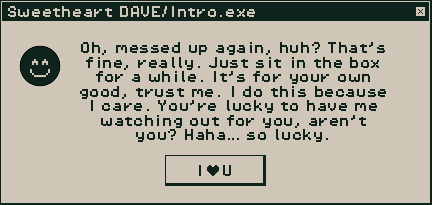
<style>
.page{position:relative;width:432px;height:205px;background:#cfc6b8}
.page>*{position:absolute;margin:0}
.t1{font:12.1px "PixelOperator8";color:#cfc6b8}
.t2{font:12.1px "PixelOperator8";color:#0e231c}
</style>
<div class="page">
<p class="t1" style="left:8px;top:6px;width:247px;height:11px">Sweetheart DAVE/Intro.exe</p>
<p class="t2" style="left:80px;top:42px;width:306px;height:100px;text-align:center">Oh, messed up again, huh? That’s fine, really. Just sit in the box for a while. It’s for your own good, trust me. I do this because I care. You’re lucky to have me watching out for you, aren’t you? Haha… so lucky.</p>
<p class="t2" style="left:199px;top:165px;width:32px;height:11px">I   U</p>
</div>
